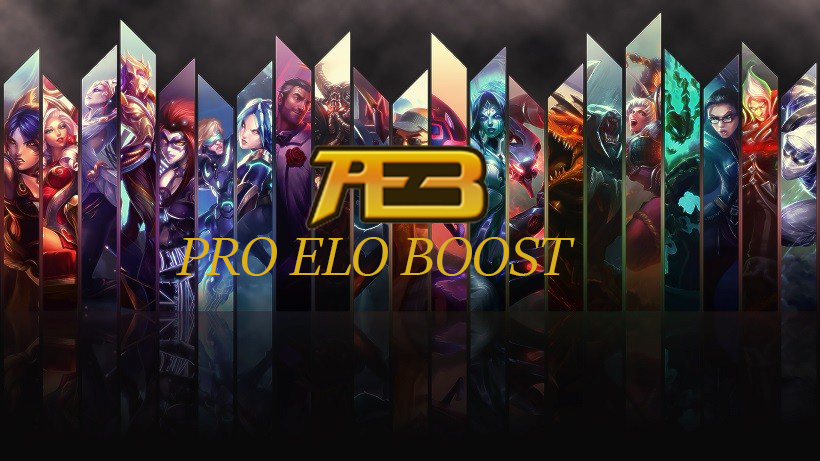
<style>
.page{position:relative;width:820px;height:461px}
.page>*{position:absolute;margin:0}
.t1{font:60px "SitkaBanner-Italic";color:#dab022}
</style>
<div class="page">
<p class="t1" style="left:176px;top:237px;width:399px;height:39px">PRO ELO BOOST</p>
</div>
